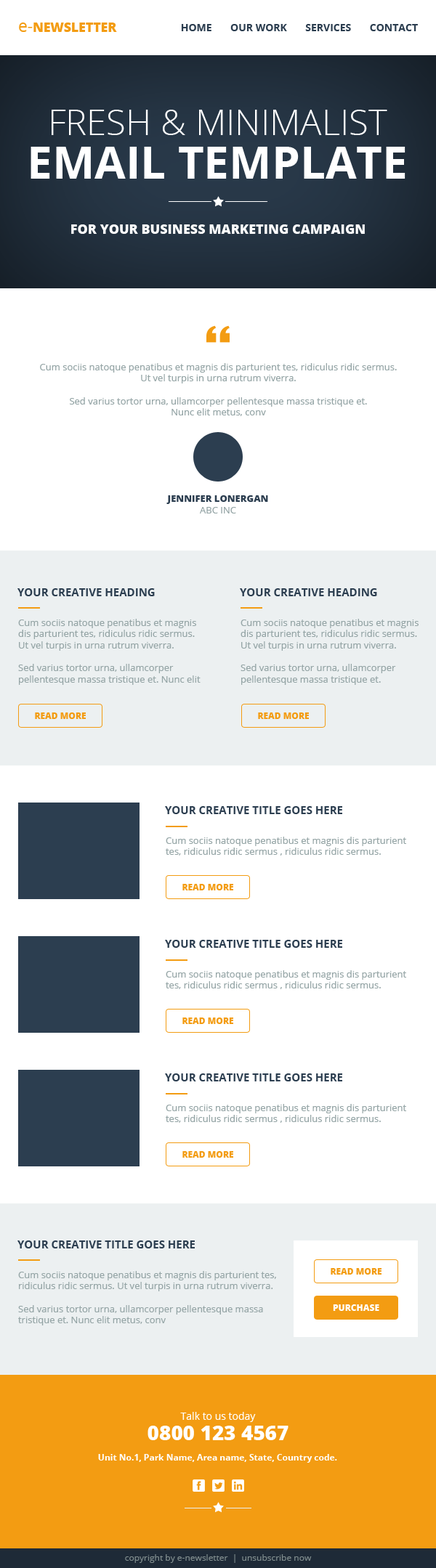
<style>
.page{position:relative;width:436px;height:1568px;background:#ffffff}
.page>*{position:absolute;margin:0}
.t1{font:12.8px "OpenSans-Extrabold";color:#f39c12;text-transform:uppercase}
.t2{font:16.5px "OpenSans";color:#f39c12}
.t3{font:10.2px "OpenSans-Bold";color:#2c3e50}
.t4{font:35.6px/43.6px "OpenSans-Light";color:#ffffff;text-transform:uppercase}
.t5{font:45px/43.6px "OpenSans-Bold";color:#ffffff;text-transform:uppercase}
.t6{font:13.1px "OpenSans-Extrabold";color:#ffffff;text-transform:uppercase}
.t7{font:9.4px "OpenSans";color:#95a5a6}
.t8{font:9.4px "OpenSans-Extrabold";color:#2c3e50;text-transform:uppercase}
.t9{font:10.9px "OpenSans-Bold";color:#2c3e50;text-transform:uppercase}
.t10{font:8.7px "OpenSans-Extrabold";color:#f39c12;text-transform:uppercase}
.t11{font:8.7px "OpenSans-Extrabold";color:#ffffff;text-transform:uppercase}
.t12{font:10.2px/20.3px "OpenSans";color:#ffffff}
.t13{font:20.3px/20.3px "OpenSans-Extrabold";color:#ffffff}
.t14{font:8.7px "OpenSans-Bold";color:#ffffff}
.t15{font:8.7px "OpenSans";color:#7f8c8d}
</style>
<div class="page">
<p class="t1" style="left:19px;top:23px;width:98px;height:9px"><span class="t2">e-</span>newsletter</p>
<p class="t3" style="left:181px;top:24px;width:237px;height:7px">HOME       OUR WORK       SERVICES       CONTACT</p>
<p class="t4" style="left:31px;top:110px;width:374px;height:69px;text-align:center">fresh &amp; minimalist<br><span class="t5">email template</span></p>
<p class="t6" style="left:71px;top:224px;width:294px;height:10px">for Your Business Marketing Campaign</p>
<p class="t7" style="left:40px;top:363px;width:357px;height:53px;text-align:center">Cum sociis natoque penatibus et magnis dis parturient tes, ridiculus ridic sermus. Ut vel turpis in urna rutrum viverra. <br><br>Sed varius tortor urna, ullamcorper pellentesque massa tristique et. <br>Nunc elit metus, conv</p>
<p class="t8" style="left:166px;top:495px;width:102px;height:18px;text-align:center">jennifer lonergan<br><span class="t7">ABC INC</span></p>
<p class="t9" style="left:17px;top:588px;width:138px;height:8px">your creative HEADING</p>
<p class="t9" style="left:240px;top:588px;width:137px;height:8px">your creative HEADING</p>
<p class="t7" style="left:18px;top:619px;width:182px;height:66px">Cum sociis natoque penatibus et magnis dis parturient tes, ridiculus ridic sermus. Ut vel turpis in urna rutrum viverra. <br><br>Sed varius tortor urna, ullamcorper pellentesque massa tristique et. Nunc elit metus, conv</p>
<p class="t7" style="left:240px;top:619px;width:178px;height:66px">Cum sociis natoque penatibus et magnis dis parturient tes, ridiculus ridic sermus. Ut vel turpis in urna rutrum viverra. <br><br>Sed varius tortor urna, ullamcorper pellentesque massa tristique et. <br>metus, conv</p>
<p class="t10" style="left:35px;top:712px;width:51px;height:7px">READ MORE</p>
<p class="t10" style="left:258px;top:712px;width:51px;height:7px">READ MORE</p>
<p class="t9" style="left:165px;top:806px;width:177px;height:8px">Your creative title goes here</p>
<p class="t7" style="left:166px;top:837px;width:240px;height:19px">Cum sociis natoque penatibus et magnis dis parturient tes, ridiculus ridic sermus , ridiculus ridic sermus.</p>
<p class="t10" style="left:182px;top:884px;width:51px;height:6px">READ MORE</p>
<p class="t9" style="left:165px;top:940px;width:177px;height:8px">Your creative title goes here</p>
<p class="t7" style="left:166px;top:970px;width:240px;height:19px">Cum sociis natoque penatibus et magnis dis parturient tes, ridiculus ridic sermus , ridiculus ridic sermus.</p>
<p class="t10" style="left:182px;top:1017px;width:51px;height:7px">READ MORE</p>
<p class="t9" style="left:165px;top:1073px;width:177px;height:8px">Your creative title goes here</p>
<p class="t7" style="left:166px;top:1104px;width:240px;height:19px">Cum sociis natoque penatibus et magnis dis parturient tes, ridiculus ridic sermus , ridiculus ridic sermus.</p>
<p class="t10" style="left:182px;top:1151px;width:51px;height:7px">READ MORE</p>
<p class="t9" style="left:17px;top:1240px;width:178px;height:8px">your creative TITLE GOES HERE</p>
<p class="t7" style="left:18px;top:1271px;width:258px;height:54px">Cum sociis natoque penatibus et magnis dis parturient tes, ridiculus ridic sermus. Ut vel turpis in urna rutrum viverra. <br><br>Sed varius tortor urna, ullamcorper pellentesque massa tristique et. Nunc elit metus, conv</p>
<p class="t10" style="left:330px;top:1268px;width:51px;height:7px">READ MORE</p>
<p class="t11" style="left:333px;top:1304px;width:46px;height:7px">PURCHASE</p>
<p class="t12" style="left:147px;top:1412px;width:141px;height:28px;text-align:center">Talk to us today<br><span class="t13">0800 123 4567</span></p>
<p class="t14" style="left:98px;top:1454px;width:239px;height:9px">Unit No.1, Park Name, Area name, State, Country code.</p>
<p class="t15" style="left:125px;top:1554px;width:187px;height:9px">copyright by e-newsletter  |  unsubscribe now</p>
</div>
